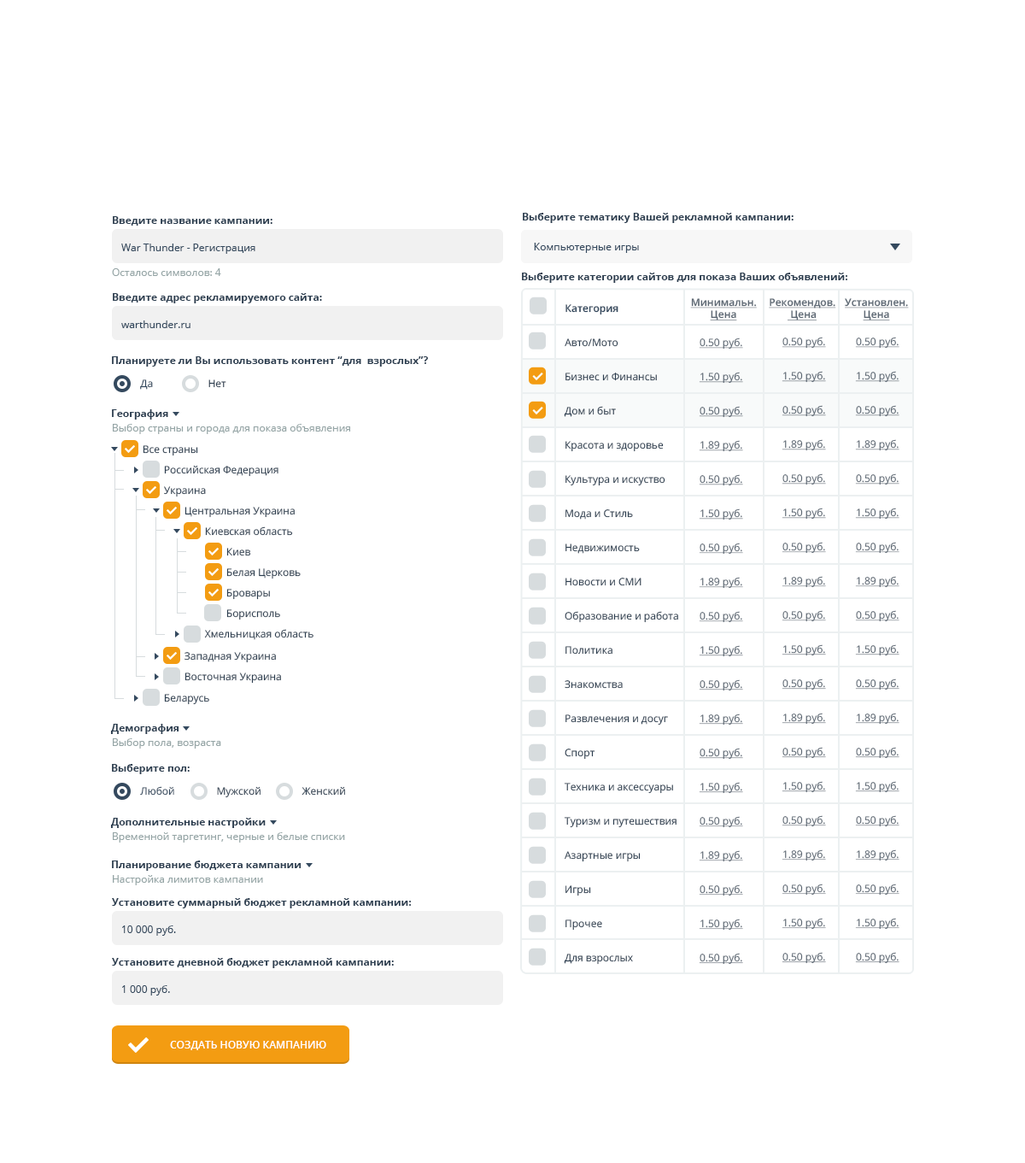
<style>
.page{position:relative;width:1025px;height:1163px;background:#ffffff}
.page>*{position:absolute;margin:0}
.t1{font:10.3px "OpenSans-Bold";color:#2c3e50}
.t2{font:10.3px "OpenSans";color:#34495e}
.t3{font:10.3px "OpenSans";color:#95a5a6}
.t4{font:10.3px "OpenSans-Semibold";color:#34495e}
.t5{font:10.3px "OpenSans-Semibold";color:#5d6874;text-decoration:underline}
.t6{font:10.3px/34.2px "OpenSans";color:#2c3e50}
.t7{font:10.3px/34.2px "OpenSans";color:#5d6874;text-decoration:underline}
.t8{font:10.3px "OpenSans";color:#2c3e50}
.t9{font:10.3px "OpenSans-Semibold";color:#ffffff;text-transform:uppercase}
</style>
<div class="page">
<p class="t1" style="left:113px;top:216px;width:160px;height:10px">Введите название кампании:</p>
<p class="t1" style="left:523px;top:213px;width:271px;height:10px">Выберите тематику Вашей рекламной кампании:</p>
<p class="t2" style="left:121px;top:244px;width:134px;height:10px">War Thunder - Регистрация</p>
<p class="t2" style="left:534px;top:243px;width:105px;height:10px">Компьютерные игры</p>
<p class="t3" style="left:112px;top:268px;width:109px;height:8px">Осталось символов: 4</p>
<p class="t1" style="left:522px;top:273px;width:326px;height:10px">Выберите категории сайтов для показа Ваших объявлений:</p>
<p class="t1" style="left:113px;top:293px;width:209px;height:10px">Введите адрес рекламируемого сайта:</p>
<p class="t4" style="left:566px;top:304px;width:53px;height:11px">Категория</p>
<p class="t5" style="left:690px;top:298px;width:67px;height:22px;text-align:center">Минимальн.<br>Цена</p>
<p class="t5" style="left:769px;top:298px;width:68px;height:22px;text-align:center">Рекомендов.<br> Цена</p>
<p class="t5" style="left:845px;top:298px;width:64px;height:22px;text-align:center">Установлен.<br>Цена</p>
<p class="t2" style="left:121px;top:320px;width:70px;height:8px">warthunder.ru</p>
<p class="t6" style="left:564px;top:338px;width:114px;height:627px">Авто/Мото<br>Бизнес и Финансы<br>Дом и быт <br>Красота и здоровье<br>Культура и искуство<br>Мода и Стиль<br>Недвижимость<br>Новости и СМИ<br>Образование и работа<br>Политика<br>Знакомства<br>Развлечения и досуг<br>Спорт<br>Техника и аксессуары<br>Туризм и путешествия<br>Азартные игры<br>Игры<br>Прочее<br>Для взрослых</p>
<p class="t7" style="left:699px;top:338px;width:44px;height:627px;text-align:center">0.50 руб.<br>1.50 руб.<br>0.50 руб.<br>1.89 руб.<br>0.50 руб.<br>1.50 руб.<br>0.50 руб.<br>1.89 руб.<br>0.50 руб.<br>1.50 руб.<br>0.50 руб.<br>1.89 руб.<br>0.50 руб.<br>1.50 руб.<br>0.50 руб.<br>1.89 руб.<br>0.50 руб.<br>1.50 руб.<br>0.50 руб.</p>
<p class="t7" style="left:782px;top:337px;width:44px;height:627px;text-align:center">0.50 руб.<br>1.50 руб.<br>0.50 руб.<br>1.89 руб.<br>0.50 руб.<br>1.50 руб.<br>0.50 руб.<br>1.89 руб.<br>0.50 руб.<br>1.50 руб.<br>0.50 руб.<br>1.89 руб.<br>0.50 руб.<br>1.50 руб.<br>0.50 руб.<br>1.89 руб.<br>0.50 руб.<br>1.50 руб.<br>0.50 руб.</p>
<p class="t7" style="left:855px;top:337px;width:45px;height:627px;text-align:center">0.50 руб.<br>1.50 руб.<br>0.50 руб.<br>1.89 руб.<br>0.50 руб.<br>1.50 руб.<br>0.50 руб.<br>1.89 руб.<br>0.50 руб.<br>1.50 руб.<br>0.50 руб.<br>1.89 руб.<br>0.50 руб.<br>1.50 руб.<br>0.50 руб.<br>1.89 руб.<br>0.50 руб.<br>1.50 руб.<br>0.50 руб.</p>
<p class="t1" style="left:112px;top:356px;width:316px;height:11px">Планируете ли Вы использовать контент “для  взрослых”?</p>
<p class="t2" style="left:140px;top:379px;width:13px;height:11px">Да</p>
<p class="t8" style="left:208px;top:379px;width:18px;height:9px">Нет</p>
<p class="t1" style="left:112px;top:409px;width:56px;height:11px">География</p>
<p class="t3" style="left:113px;top:424px;width:237px;height:10px">Выбор страны и города для показа объявления</p>
<p class="t8" style="left:143px;top:445px;width:55px;height:11px">Все страны</p>
<p class="t8" style="left:164px;top:465px;width:115px;height:12px">Российская Федерация</p>
<p class="t8" style="left:164px;top:486px;width:42px;height:11px">Украина</p>
<p class="t8" style="left:185px;top:507px;width:110px;height:11px">Центральная Украина</p>
<p class="t8" style="left:205px;top:526px;width:88px;height:10px">Киевская область</p>
<p class="t8" style="left:226px;top:548px;width:25px;height:8px">Киев</p>
<p class="t8" style="left:226px;top:568px;width:75px;height:11px">Белая Церковь</p>
<p class="t8" style="left:226px;top:589px;width:44px;height:11px">Бровары</p>
<p class="t8" style="left:226px;top:609px;width:54px;height:11px">Борисполь</p>
<p class="t8" style="left:204px;top:629px;width:110px;height:11px">Хмельницкая область</p>
<p class="t8" style="left:185px;top:652px;width:91px;height:11px">Западная Украина</p>
<p class="t8" style="left:185px;top:672px;width:96px;height:12px">Восточная Украина</p>
<p class="t8" style="left:164px;top:694px;width:45px;height:11px">Беларусь</p>
<p class="t1" style="left:110px;top:724px;width:69px;height:10px">Демография</p>
<p class="t3" style="left:113px;top:738px;width:108px;height:11px">Выбор пола, возраста</p>
<p class="t1" style="left:112px;top:764px;width:78px;height:10px">Выберите пол:</p>
<p class="t2" style="left:140px;top:786px;width:34px;height:10px">Любой</p>
<p class="t8" style="left:217px;top:786px;width:44px;height:12px">Мужской</p>
<p class="t8" style="left:302px;top:786px;width:43px;height:10px">Женский</p>
<p class="t1" style="left:110px;top:818px;width:156px;height:10px">Дополнительные настройки</p>
<p class="t3" style="left:113px;top:832px;width:232px;height:11px">Временной таргетинг, черные и белые списки</p>
<p class="t1" style="left:112px;top:860px;width:190px;height:11px">Планирование бюджета кампании</p>
<p class="t3" style="left:113px;top:875px;width:150px;height:10px">Настройка лимитов кампании</p>
<p class="t1" style="left:112px;top:898px;width:299px;height:10px">Установите суммарный бюджет рекламной кампании:</p>
<p class="t2" style="left:122px;top:925px;width:54px;height:11px">10 000 руб.</p>
<p class="t1" style="left:112px;top:958px;width:282px;height:10px">Установите дневной бюджет рекламной кампании:</p>
<p class="t2" style="left:122px;top:985px;width:48px;height:10px">1 000 руб.</p>
<p class="t9" style="left:170px;top:1041px;width:156px;height:9px">Создать новую кампанию</p>
</div>
